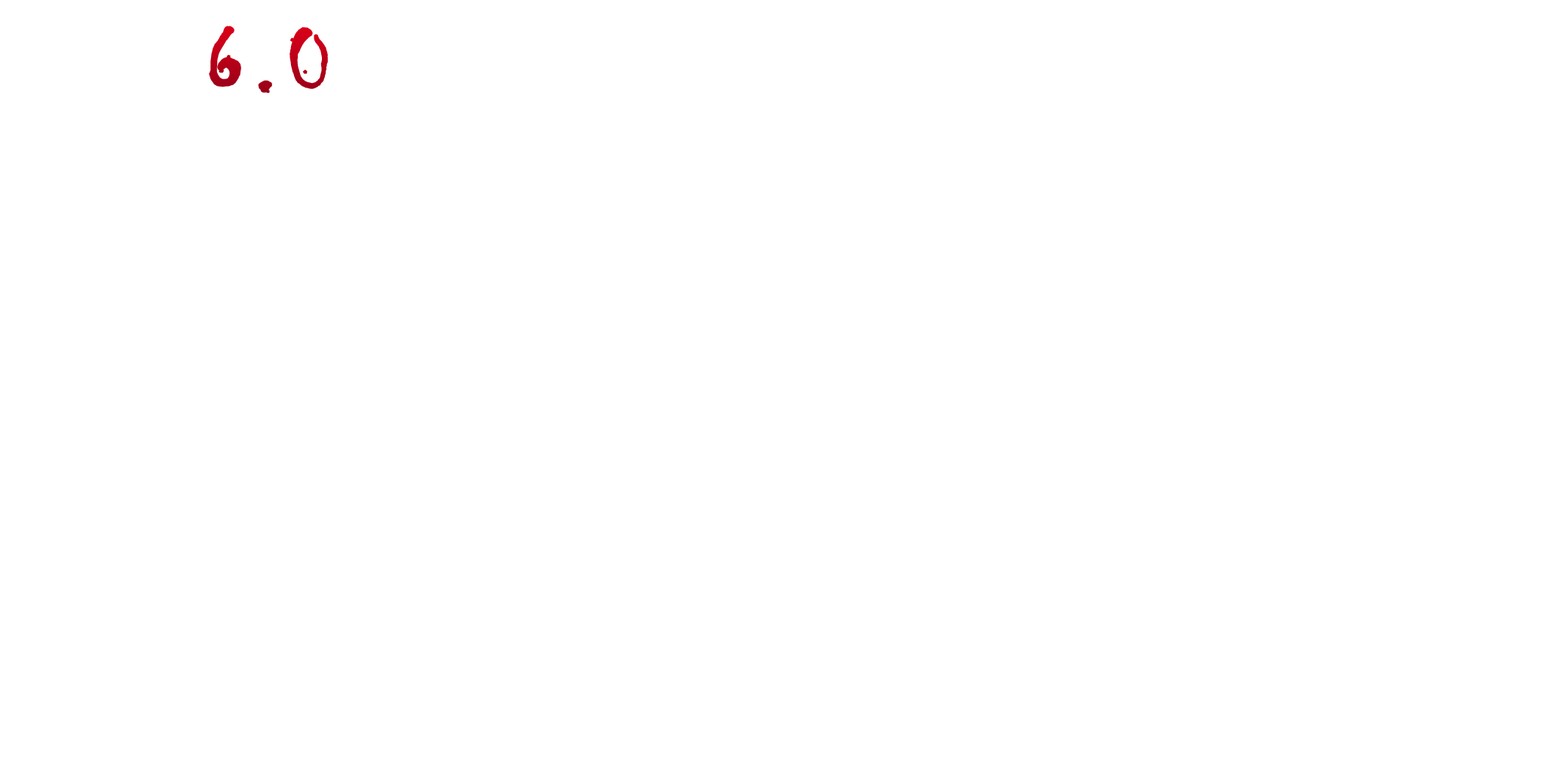
<style>
.page{position:relative;width:1544px;height:772px;background:#ffffff}
.page>*{position:absolute;margin:0}
.t1{font:90.5px "Chiller-Regular";letter-spacing:0.1em;font-variant:small-caps;font-weight:bold}
</style>
<div class="page">
<p class="t1" style="left:209px;top:26px;width:119px;height:68px">6.0</p>
</div>
